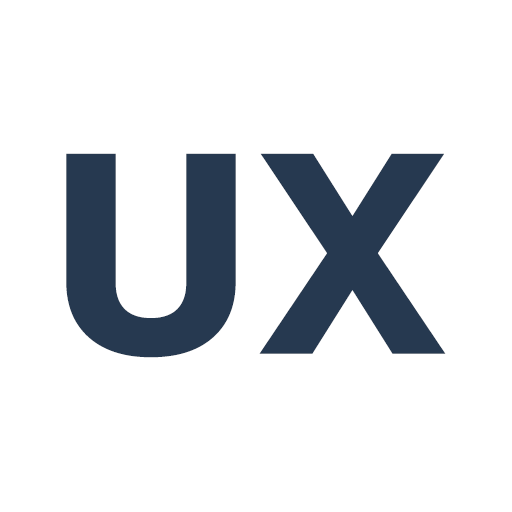
<style>
.page{position:relative;width:512px;height:512px;background:#ffffff}
.page>*{position:absolute;margin:0}
.t1{font:300px "Seravek-Bold";color:#263950}
</style>
<div class="page">
<p class="t1" style="left:66px;top:153px;width:380px;height:205px">UX</p>
</div>
